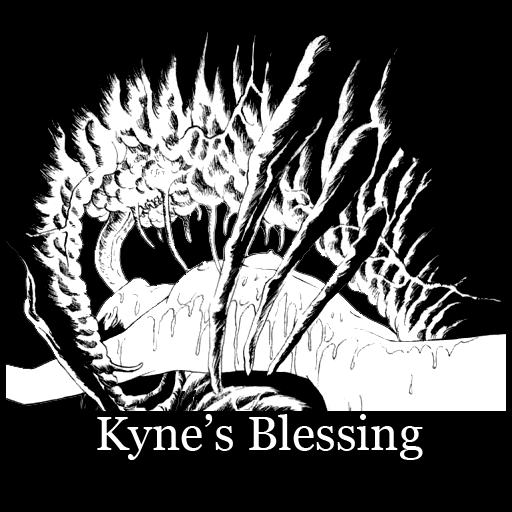
<style>
.page{position:relative;width:512px;height:512px;background:#000000}
.page>*{position:absolute;margin:0}
.t1{font:48px "Georgia";color:#ffffff}
</style>
<div class="page">
<p class="t1" style="left:97px;top:414px;width:326px;height:46px">Kyne’s Blessing</p>
</div>
